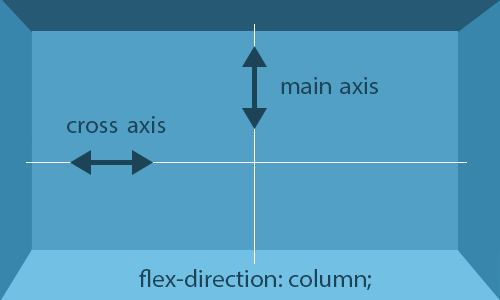
<style>
.page{position:relative;width:500px;height:300px;background:#53a0c6}
.page>*{position:absolute;margin:0}
.t1{font:25px "MyriadPro-Regular";color:#1d4356}
</style>
<div class="page">
<p class="t1" style="left:281px;top:77px;width:97px;height:17px">main axis</p>
<p class="t1" style="left:67px;top:116px;width:99px;height:17px">cross axis</p>
<p class="t1" style="left:139px;top:269px;width:232px;height:22px">flex-direction: column;</p>
</div>
